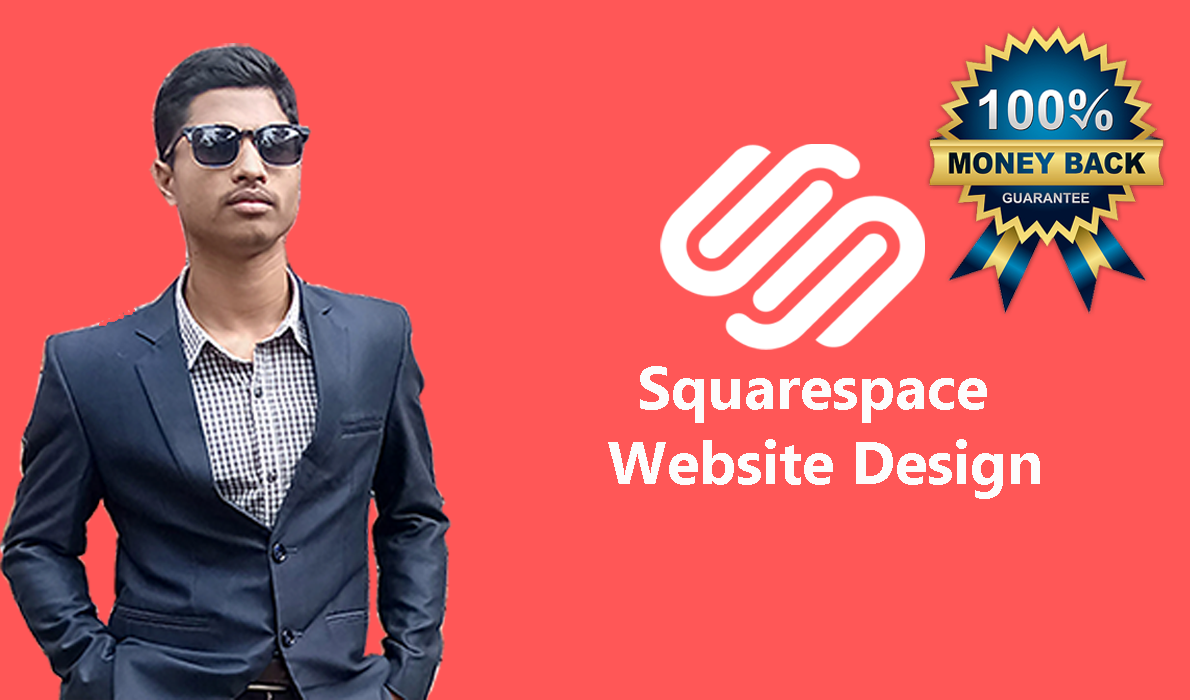
<style>
.page{position:relative;width:1190px;height:700px;background:#ff5757}
.page>*{position:absolute;margin:0}
.t1{font:60px "Ebrima-Bold";color:#fcfcfc}
</style>
<div class="page">
<p class="t1" style="left:640px;top:366px;width:347px;height:57px">Squarespace</p>
<p class="t1" style="left:608px;top:439px;width:432px;height:60px">Website Design</p>
</div>
